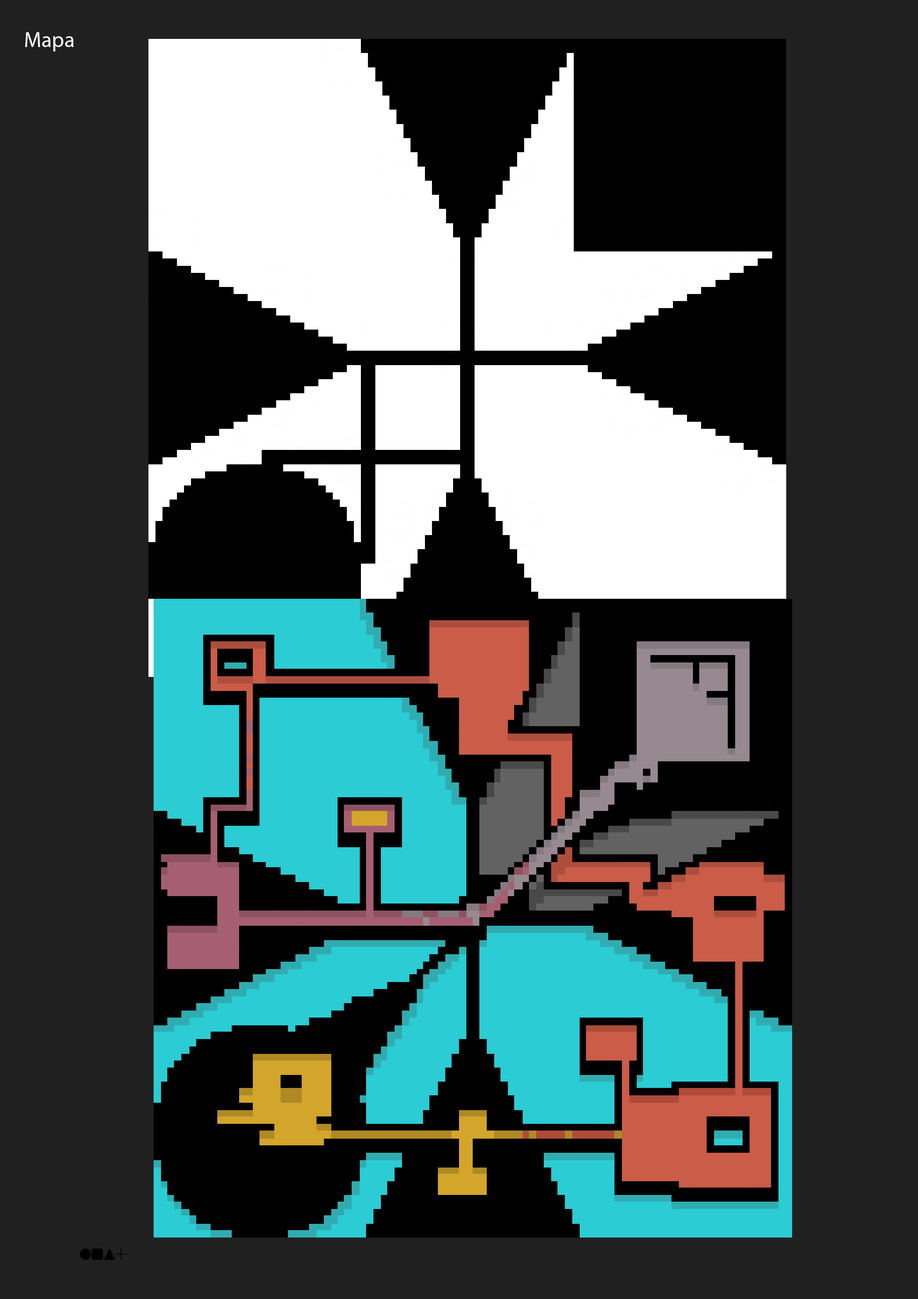
<style>
.page{position:relative;width:918px;height:1299px;background:#202020}
.page>*{position:absolute;margin:0}
.t1{font:21.6px "MyriadPro-Regular";color:#ffffff}
</style>
<div class="page">
<p class="t1" style="left:25px;top:32px;width:49px;height:19px">Mapa</p>
</div>
